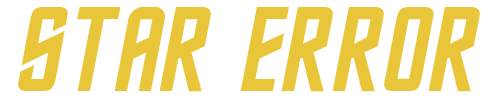
<style>
.page{position:relative;width:500px;height:100px;background:#ffffff}
.page>*{position:absolute;margin:0}
.t1{font:121.2px "FederationClassic";color:#e9c539}
</style>
<div class="page">
<p class="t1" style="left:18px;top:7px;width:462px;height:85px">star error</p>
</div>
